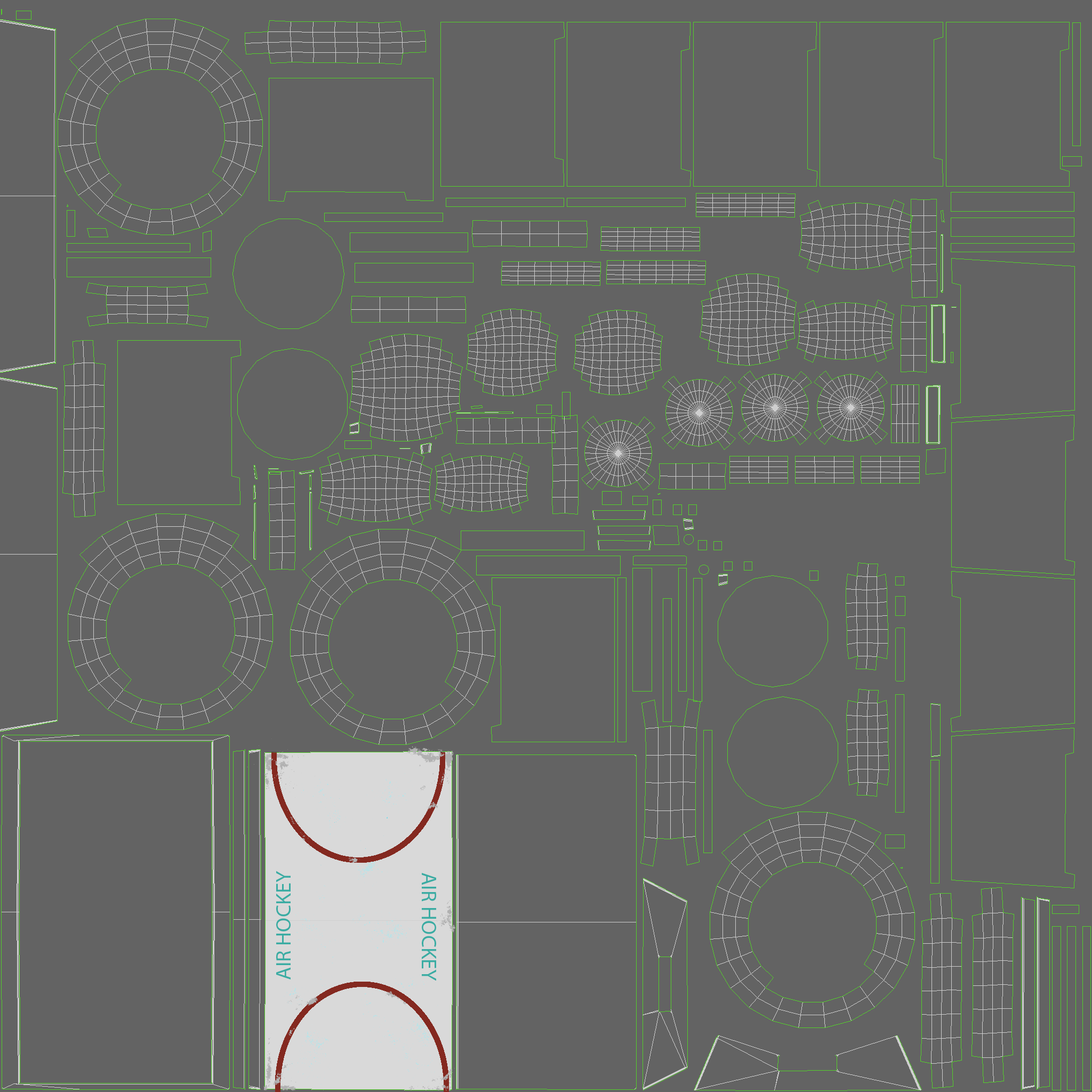
<style>
.page{position:relative;width:1092px;height:1092px;background:#636363}
.page>*{position:absolute;margin:0}
.t1{font:21.3px "MyriadPro-Regular";color:#3aaca3}
</style>
<div class="page">
<p class="t1" style="left:276px;top:871px;width:15px;height:108px;rotate:-90deg">AIR HOCKEY</p>
<p class="t1" style="left:422px;top:873px;width:14px;height:108px;rotate:90deg">AIR HOCKEY</p>
</div>
